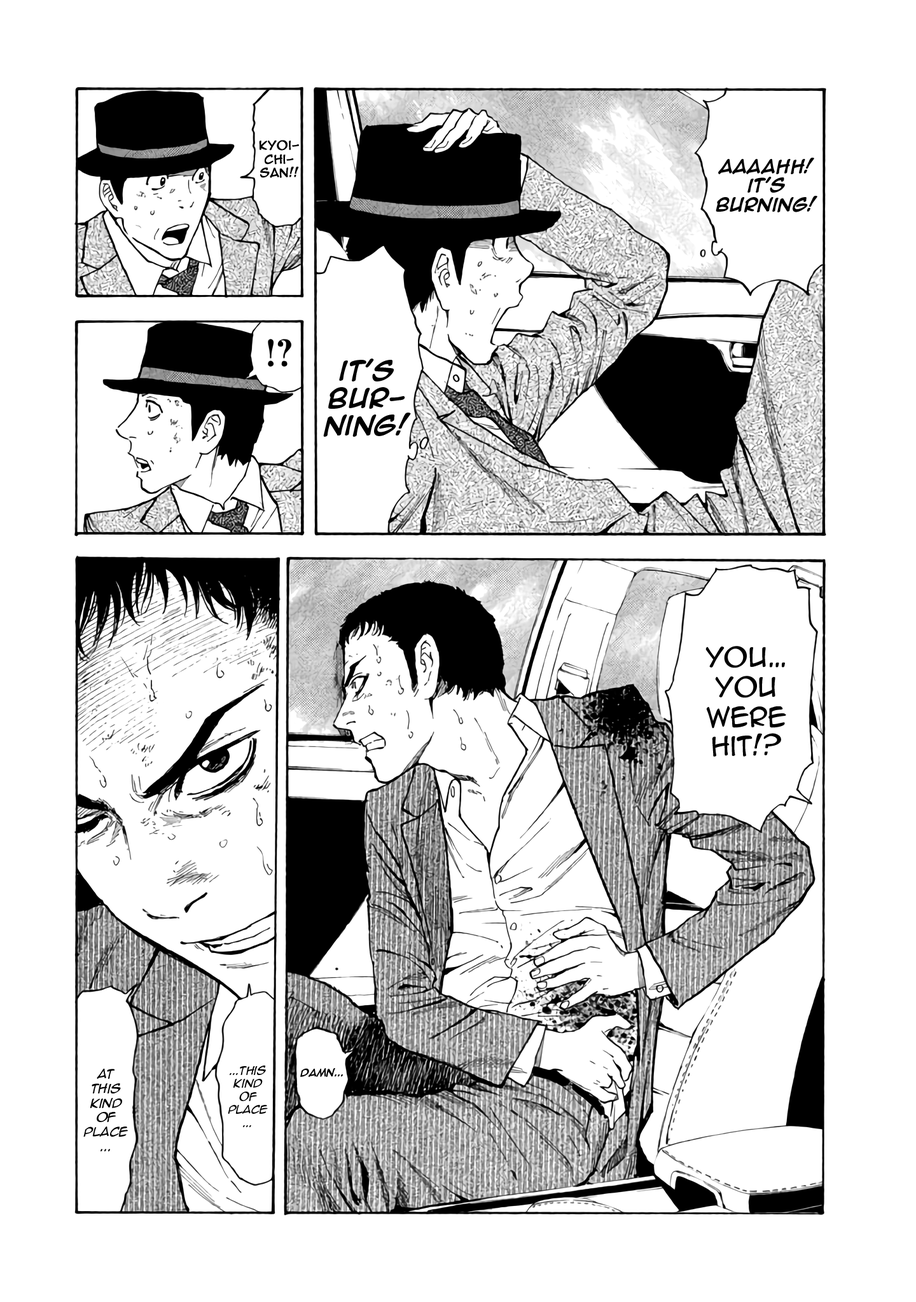
<style>
.page{position:relative;width:916px;height:1302px;background:#ffffff}
.page>*{position:absolute;margin:0}
.t1{font:11.4px "AnimeAce2.0BB";color:#000000;font-weight:bold}
.t2{font:15.9px "AnimeAce2.0BB-Bold";color:#000000}
.t3{font:22.9px "AnimeAce2.0BB-Bold";color:#000000}
.t4{font:24.8px "AnimeAce2.0BB";color:#000000}
.t5{font:12.1px "AnimeAce2.0BB-Italic";color:#000000}
.t6{font:10.8px "AnimeAce2.0BB-Italic";color:#000000}
.t7{font:8.9px "AnimeAce2.0BB-Bold";color:#000000}
</style>
<div class="page">
<p class="t1" style="left:259px;top:140px;width:40px;height:38px;text-align:center">Kyoichi-<br>san!!</p>
<p class="t2" style="left:715px;top:158px;width:102px;height:54px;text-align:center">aaaahh!<br>it’s<br>burning!</p>
<p class="t3" style="left:323px;top:359px;width:88px;height:78px;text-align:center">it’s<br>bur-<br>ning!</p>
<p class="t4" style="left:705px;top:646px;width:81px;height:111px;text-align:center">You…<br>you<br>were<br>hit!?</p>
<p class="t5" style="left:83px;top:1069px;width:45px;height:83px;text-align:center">At<br>this<br>kind<br>of<br>place<br>...</p>
<p class="t6" style="left:228px;top:1066px;width:40px;height:61px;text-align:center">...this<br>kind<br>of<br>place<br>...</p>
<p class="t7" style="left:300px;top:1068px;width:43px;height:9px">damn...</p>
</div>
